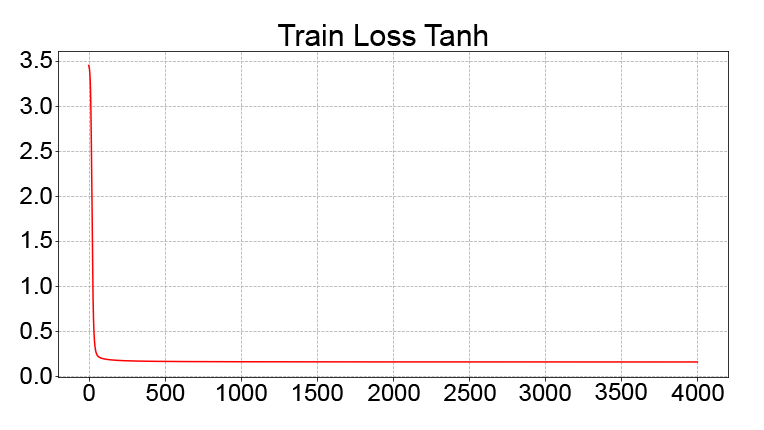
<style>
.page{position:relative;width:764px;height:430px;background:#ffffff}
.page>*{position:absolute;margin:0}
.t1{font:30px "ArialMT";color:#000000}
.t2{font:24px "ArialMT";color:#000000}
</style>
<div class="page">
<p class="t1" style="left:278px;top:24px;width:210px;height:22px">Train Loss Tanh</p>
<p class="t2" style="left:20px;top:51px;width:32px;height:17px">3.5</p>
<p class="t2" style="left:20px;top:97px;width:32px;height:17px">3.0</p>
<p class="t2" style="left:20px;top:142px;width:32px;height:17px">2.5</p>
<p class="t2" style="left:20px;top:187px;width:32px;height:17px">2.0</p>
<p class="t2" style="left:22px;top:231px;width:30px;height:17px">1.5</p>
<p class="t2" style="left:22px;top:277px;width:30px;height:17px">1.0</p>
<p class="t2" style="left:20px;top:322px;width:32px;height:17px">0.5</p>
<p class="t2" style="left:20px;top:367px;width:32px;height:17px">0.0</p>
<p class="t2" style="left:83px;top:384px;width:12px;height:17px">0</p>
<p class="t2" style="left:146px;top:384px;width:39px;height:17px">500</p>
<p class="t2" style="left:217px;top:384px;width:50px;height:17px">1000</p>
<p class="t2" style="left:293px;top:384px;width:50px;height:17px">1500</p>
<p class="t2" style="left:368px;top:384px;width:52px;height:17px">2000</p>
<p class="t2" style="left:444px;top:384px;width:52px;height:17px">2500</p>
<p class="t2" style="left:519px;top:384px;width:52px;height:17px">3000</p>
<p class="t2" style="left:595px;top:383px;width:52px;height:17px">3500</p>
<p class="t2" style="left:671px;top:384px;width:53px;height:17px">4000</p>
</div>
